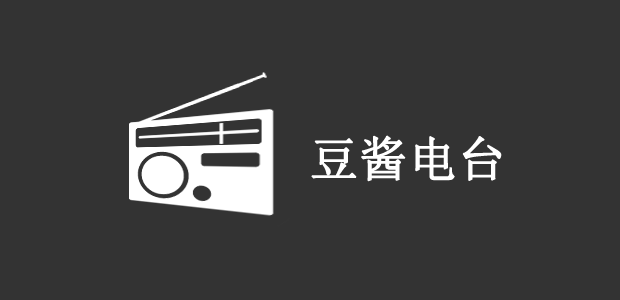
<style>
.page{position:relative;width:620px;height:300px;background:#333333}
.page>*{position:absolute;margin:0}
.t1{font:48px "NSimSun";color:#ffffff;font-weight:bold}
</style>
<div class="page">
<p class="t1" style="left:311px;top:135px;width:191px;height:47px">豆酱电台</p>
</div>
